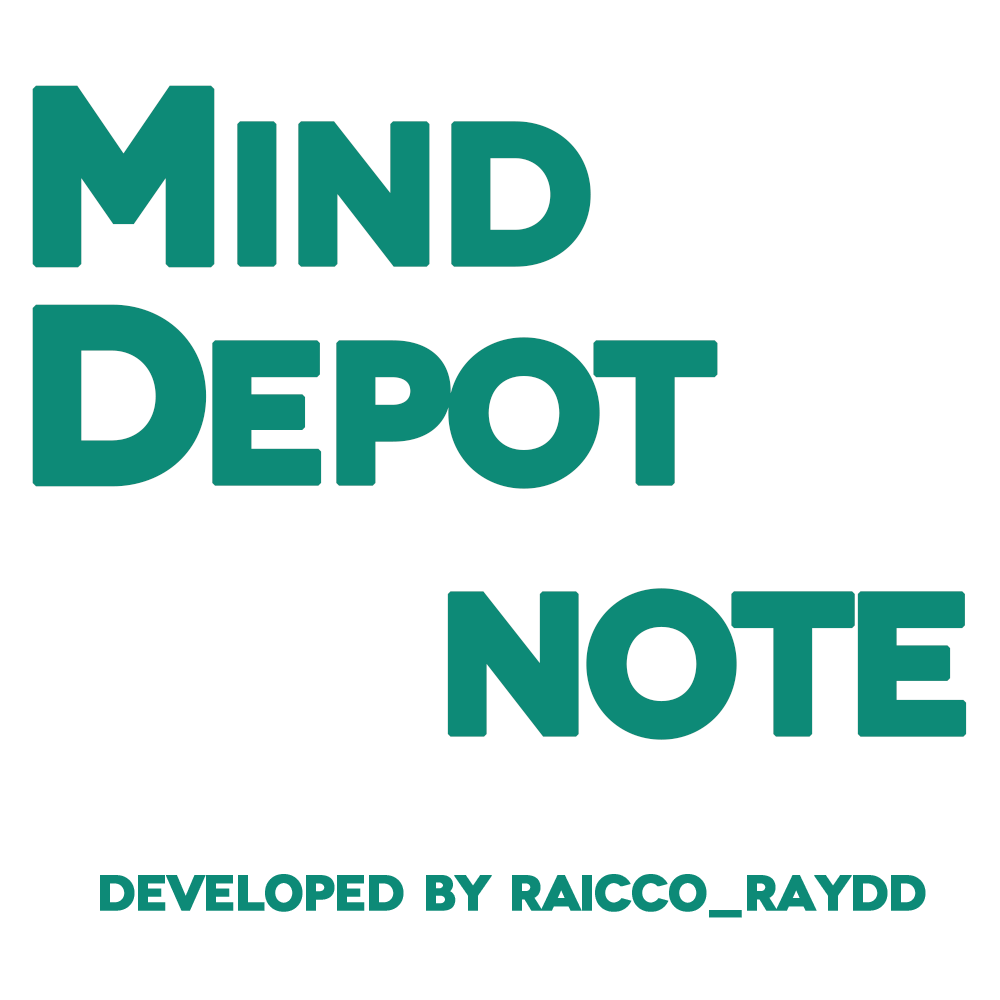
<style>
.page{position:relative;width:1000px;height:1000px;background:#ffffff}
.page>*{position:absolute;margin:0}
.t1{font:200.7px "Novecentowide-Bold";letter-spacing:-0.05em;color:#0d8a77;text-transform:uppercase;font-weight:bold}
.t2{font:250px "Novecentowide-Bold";letter-spacing:-0.05em;color:#0d8a77;text-transform:uppercase;font-weight:bold}
.t3{font:200.7px "Novecentowide-Bold";letter-spacing:-0.075em;color:#0d8a77;text-transform:uppercase;font-weight:bold}
.t4{font:250px "Novecentowide-Bold";letter-spacing:-0.075em;color:#0d8a77;text-transform:uppercase;font-weight:bold}
.t5{font:200px "Novecentowide-Bold";letter-spacing:-0.075em;color:#0d8a77;text-transform:uppercase;font-weight:bold}
</style>
<div class="page">
<p class="t1" style="left:32px;top:85px;width:559px;height:183px"><span class="t2">m</span>ind</p>
<p class="t3" style="left:32px;top:304px;width:686px;height:185px"><span class="t4">d</span>epot</p>
<p class="t5" style="left:447px;top:588px;width:520px;height:152px">note</p>
</div>
